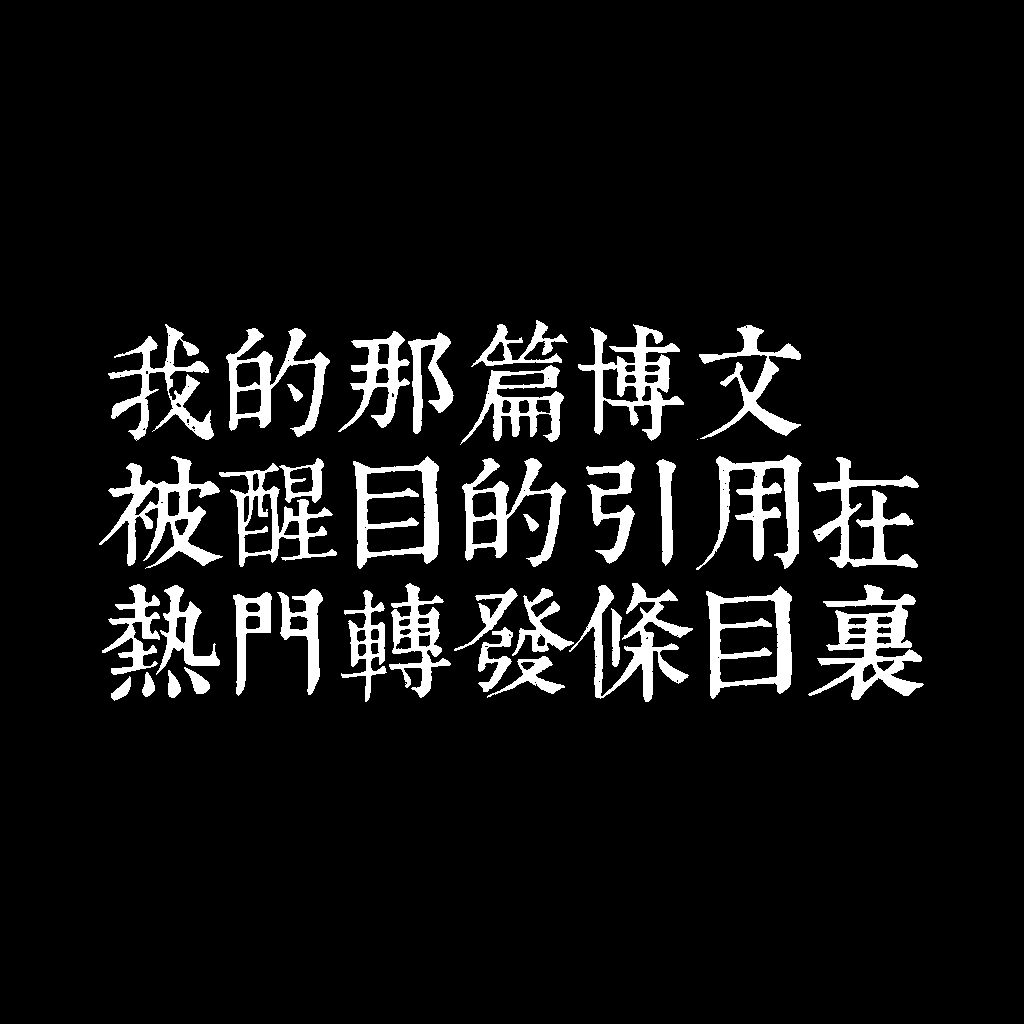
<style>
.page{position:relative;width:1024px;height:1024px;background:#000000}
.page>*{position:absolute;margin:0}
.t1{font:120px/130px "TpldKhangXiDictTrial";letter-spacing:-0.02em;color:#ffffff}
</style>
<div class="page">
<p class="t1" style="left:99px;top:320px;width:825px;height:382px">我的那篇博文<br>被醒目的引用在<br>熱門轉發條目裏</p>
</div>
